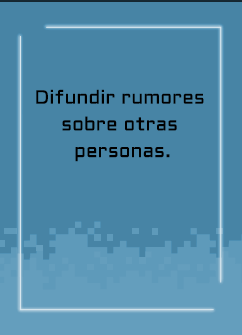
<style>
.page{position:relative;width:242px;height:335px;background:#4784a5}
.page>*{position:absolute;margin:0}
.t1{font:19.2px/26.7px "Aldrich-Regular";letter-spacing:0.005em;color:#000000}
</style>
<div class="page">
<p class="t1" style="left:36px;top:89px;width:168px;height:73px;text-align:center">Difundir rumores <br>sobre otras <br>personas.</p>
</div>
